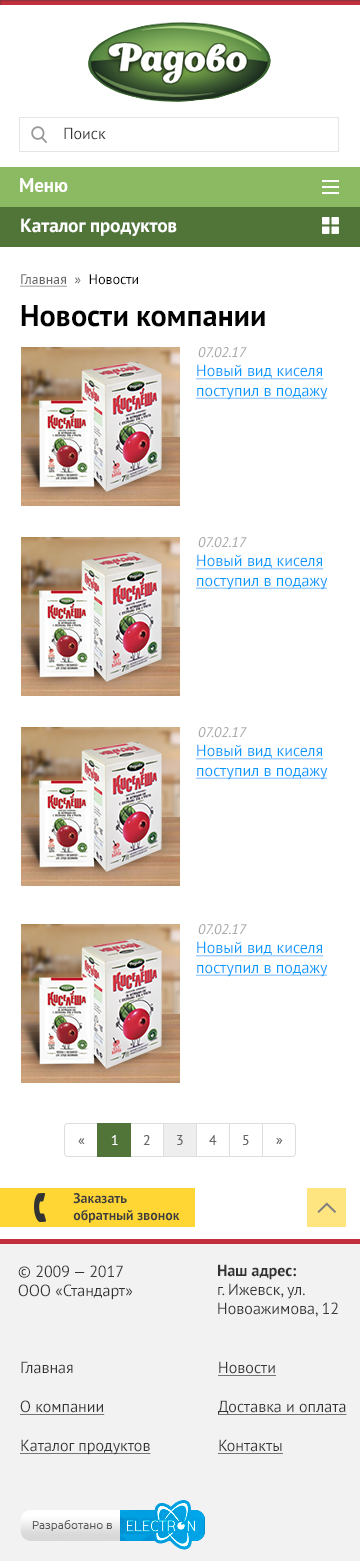
<style>
.page{position:relative;width:360px;height:1561px;background:#ffffff}
.page>*{position:absolute;margin:0}
.t1{font:16px "PTSans-Regular";color:#333333}
.t2{font:19px "PTSans-Bold";color:#ffffff}
.t3{font:14px "PTSans-Regular";color:#666666;text-decoration:underline}
.t4{font:14px "PTSans-Regular";color:#666666}
.t5{font:14px "PTSans-Regular";color:#000000}
.t6{font:30px "PTSans-Bold";color:#000000}
.t7{font:14px "PTSans-Italic";color:#aaaaaa}
.t8{font:16px "PTSans-Regular";color:#0099ff;text-decoration:underline}
.t9{font:14px "PTSans-Regular";color:#ffffff}
.t10{font:14px "PTSans-Bold";color:#3e3e3e}
.t11{font:16px "PTSans-Bold";color:#333333}
.t12{font:16px/39px "PTSans-Regular";color:#333333;text-decoration:underline}
.t13{font:16px/39px "PTSans-Regular";color:#333333}
</style>
<div class="page">
<p class="t1" style="left:64px;top:127px;width:42px;height:13px">Поиск</p>
<p class="t2" style="left:20px;top:178px;width:48px;height:14px">Меню</p>
<p class="t2" style="left:21px;top:218px;width:156px;height:18px">Каталог продуктов</p>
<p class="t3" style="left:20px;top:274px;width:118px;height:13px">Главная<span class="t4">  »  </span><span class="t5">Новости</span></p>
<p class="t6" style="left:21px;top:305px;width:244px;height:22px">Новости компании</p>
<p class="t7" style="left:198px;top:347px;width:49px;height:11px">07.02.17</p>
<p class="t8" style="left:196px;top:364px;width:132px;height:36px">Новый вид киселя поступил в подажу</p>
<p class="t7" style="left:198px;top:537px;width:49px;height:11px">07.02.17</p>
<p class="t8" style="left:196px;top:554px;width:132px;height:36px">Новый вид киселя поступил в подажу</p>
<p class="t7" style="left:198px;top:727px;width:49px;height:11px">07.02.17</p>
<p class="t8" style="left:196px;top:744px;width:132px;height:36px">Новый вид киселя поступил в подажу</p>
<p class="t7" style="left:198px;top:924px;width:49px;height:11px">07.02.17</p>
<p class="t8" style="left:196px;top:941px;width:132px;height:36px">Новый вид киселя поступил в подажу</p>
<p class="t4" style="left:78px;top:1138px;width:7px;height:6px">«</p>
<p class="t9" style="left:111px;top:1135px;width:7px;height:10px">1</p>
<p class="t4" style="left:143px;top:1135px;width:7px;height:10px">2</p>
<p class="t4" style="left:177px;top:1135px;width:6px;height:10px">3</p>
<p class="t4" style="left:209px;top:1135px;width:8px;height:10px">4</p>
<p class="t4" style="left:243px;top:1135px;width:6px;height:10px">5</p>
<p class="t4" style="left:276px;top:1138px;width:7px;height:6px">»</p>
<p class="t10" style="left:73px;top:1193px;width:107px;height:30px">Заказать <br>обратный звонок</p>
<p class="t1" style="left:18px;top:1265px;width:115px;height:35px">© 2009 — 2017<br>ООО «Стандарт»</p>
<p class="t1" style="left:218px;top:1264px;width:120px;height:53px"><span class="t11">Наш адрес:<br></span>г. Ижевск, ул. <br>Новоажимова, 12</p>
<p class="t12" style="left:20px;top:1361px;width:131px;height:94px"><span class="t13">Главная<br></span>О компании<br>Каталог продуктов</p>
<p class="t12" style="left:218px;top:1361px;width:129px;height:93px">Новости<br>Доставка и оплата<br>Контакты</p>
</div>
